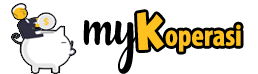
<style>
.page{position:relative;width:258px;height:74px;background:#ffffff}
.page>*{position:absolute;margin:0}
.t1{font:30px "MyriadPro-BoldCond";color:#ffc120}
.t2{font:30px "Splatch";color:#ffc120}
.t3{font:30px "LostinWild-Regular";color:#000000}
</style>
<div class="page">
<p class="t1" style="left:137px;top:12px;width:104px;height:40px"><span class="t2">K</span>operasi</p>
<p class="t3" style="left:83px;top:20px;width:58px;height:54px;text-align:center">my</p>
</div>
